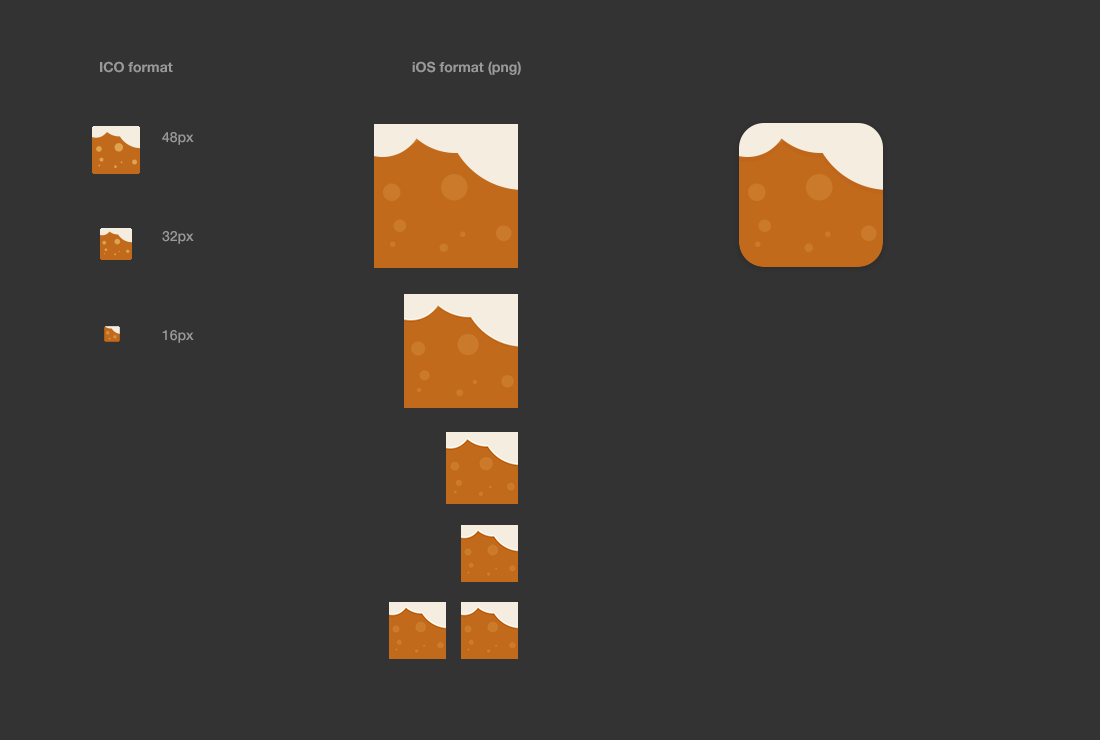
<style>
.page{position:relative;width:1100px;height:740px;background:#333333}
.page>*{position:absolute;margin:0}
.t1{font:14px "HelveticaNeueLTStd-Bd";color:#999999}
.t2{font:14px/99px "HelveticaNeueLTStd-Md";color:#999999}
</style>
<div class="page">
<p class="t1" style="left:100px;top:61px;width:73px;height:12px">ICO format</p>
<p class="t1" style="left:412px;top:61px;width:109px;height:14px">iOS format (png)</p>
<p class="t2" style="left:162px;top:132px;width:32px;height:211px">48px<br>32px<br>16px</p>
</div>
